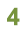
<style>
.page{position:relative;width:28px;height:34px;background:#ffffff}
.page>*{position:absolute;margin:0}
.t1{font:24px "Arial-BoldMT";color:#77933c}
</style>
<div class="page">
<p class="t1" style="left:7px;top:7px;width:13px;height:19px">4</p>
</div>
